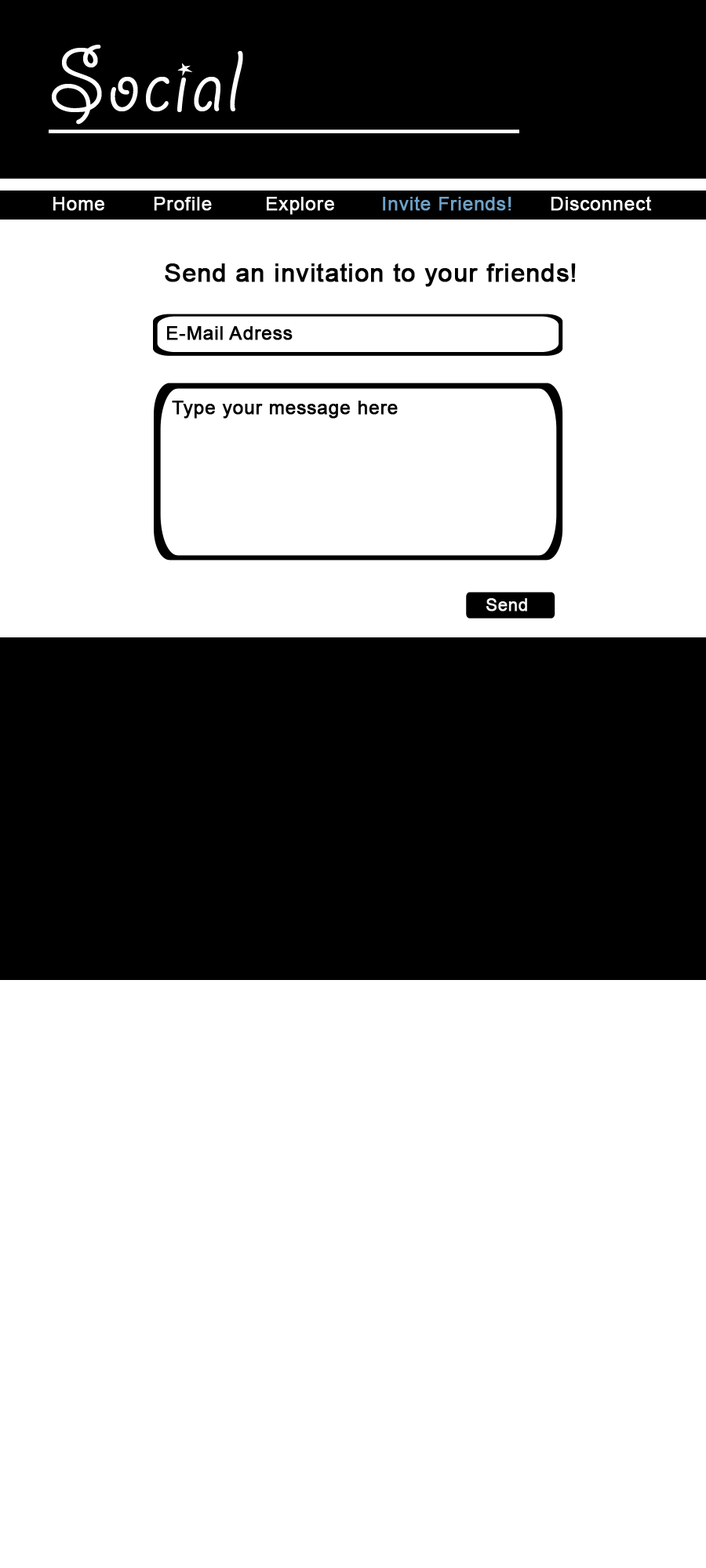
<style>
.page{position:relative;width:706px;height:1568px;background:#ffffff}
.page>*{position:absolute;margin:0}
.t1{font:97.2px "GiddyupStd";letter-spacing:0.02em;color:#ffffff}
.t2{font:18.8px "ArialMT";letter-spacing:0.02em;color:#ffffff;font-weight:bold}
.t3{font:18.8px "ArialMT";letter-spacing:0.02em;color:#fbfbfb;font-weight:bold}
.t4{font:18.8px "ArialMT";letter-spacing:0.02em;color:#fafafa;font-weight:bold}
.t5{font:18.8px "ArialMT";letter-spacing:0.02em;color:#6fa1c7;font-weight:bold}
.t6{font:25.1px "ArialMT";letter-spacing:0.02em;color:#000000;font-weight:bold}
.t7{font:18.8px "ArialMT";letter-spacing:0.02em;color:#000000;font-weight:bold}
.t8{font:16.9px "ArialMT";letter-spacing:0.02em;color:#f5f5f5;font-weight:bold}
</style>
<div class="page">
<p class="t1" style="left:52px;top:45px;width:191px;height:80px">Social</p>
<p class="t2" style="left:53px;top:197px;width:51px;height:14px">Home</p>
<p class="t3" style="left:154px;top:197px;width:58px;height:14px">Profile</p>
<p class="t4" style="left:267px;top:197px;width:67px;height:18px">Explore</p>
<p class="t5" style="left:383px;top:196px;width:128px;height:15px">Invite Friends!</p>
<p class="t2" style="left:550px;top:196px;width:102px;height:15px">Disconnect</p>
<p class="t6" style="left:165px;top:263px;width:410px;height:24px">Send an invitation to your friends!</p>
<p class="t7" style="left:167px;top:326px;width:125px;height:14px">E-Mail Adress</p>
<p class="t7" style="left:172px;top:401px;width:225px;height:18px">Type your message here</p>
<p class="t8" style="left:486px;top:598px;width:41px;height:14px">Send</p>
</div>
